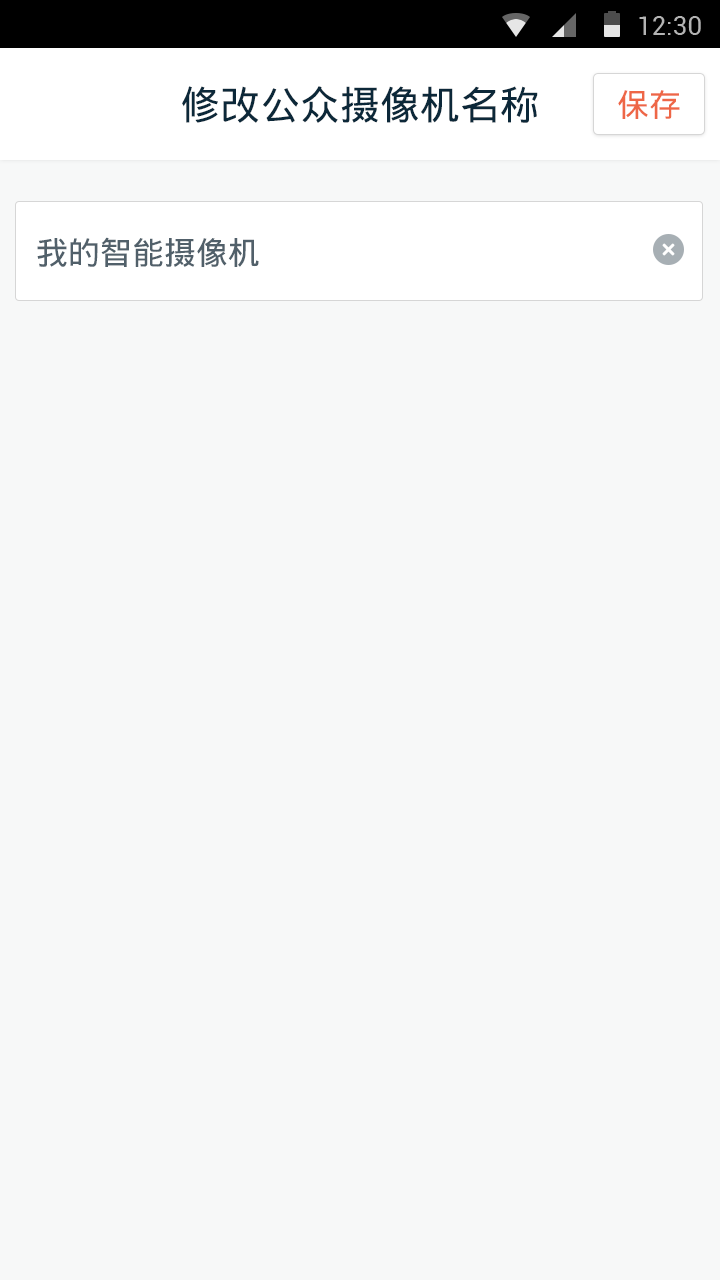
<style>
.page{position:relative;width:720px;height:1280px;background:#f7f8f8}
.page>*{position:absolute;margin:0}
.t1{font:40px "DroidSansFallback";color:#0c2839}
.t2{font:32px "DroidSansFallback";color:#ee6646}
.t3{font:32px "DroidSansFallback";color:#51606a}
</style>
<div class="page">
<p class="t1" style="left:182px;top:86px;width:356px;height:37px">修改公众摄像机名称</p>
<p class="t2" style="left:618px;top:90px;width:62px;height:29px">保存</p>
<p class="t3" style="left:37px;top:237px;width:222px;height:30px">我的智能摄像机</p>
</div>
